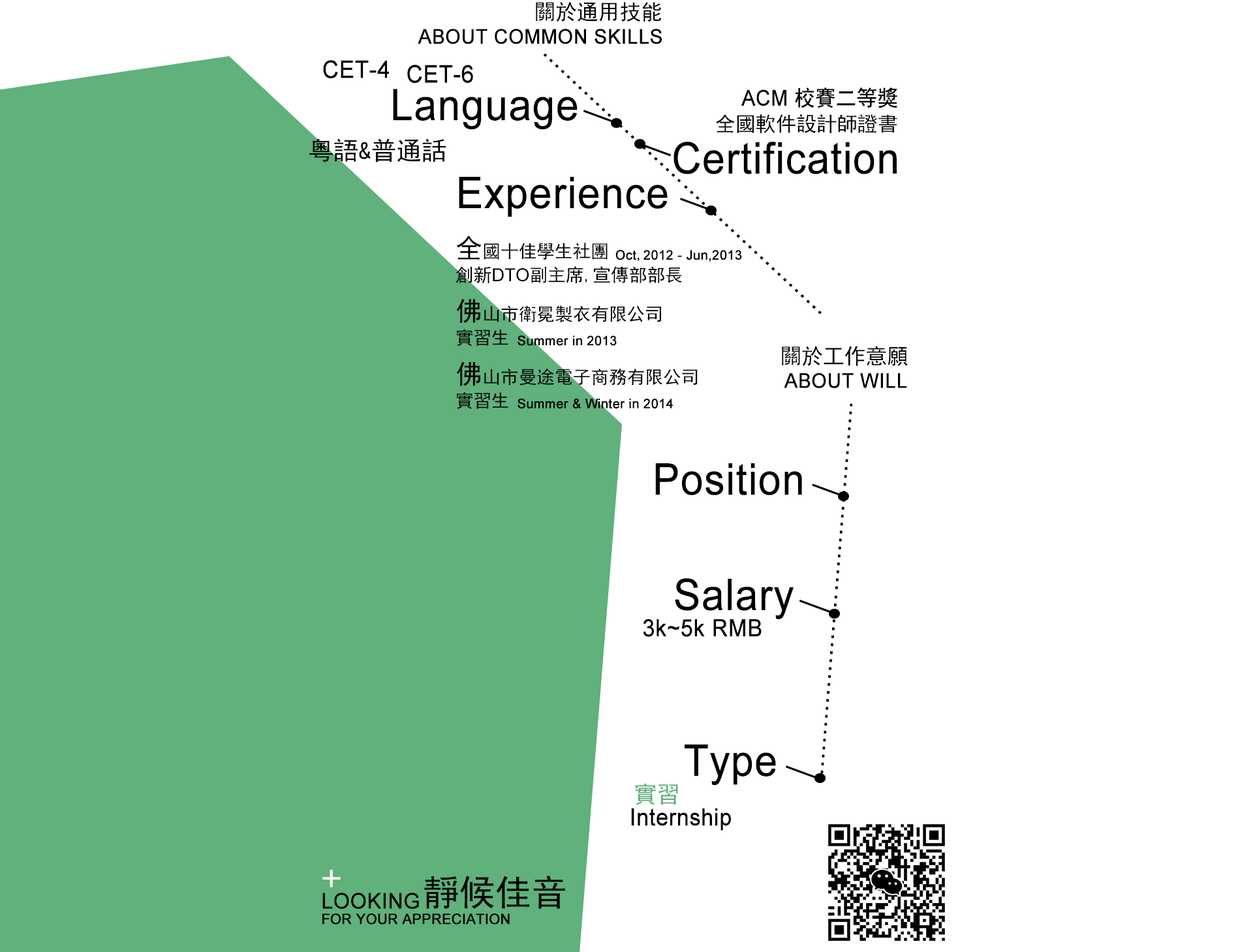
<style>
.page{position:relative;width:1253px;height:952px;background:#ffffff}
.page>*{position:absolute;margin:0}
.t1{font:21.4px "SimHei";color:#000000}
.t2{font:20.2px "ArialMT";color:#000000;font-weight:bold;scale:0.96 1}
.t3{font:24.1px "ArialMT";color:#000000;font-weight:bold;scale:0.93 1}
.t4{font:43.4px "ArialMT";color:#000000;font-weight:bold;scale:0.93 1}
.t5{font:21.7px "SimHei";color:#000000;font-weight:bold;scale:0.93 1}
.t6{font:21.7px "ArialMT";color:#000000;font-weight:bold;scale:0.93 1}
.t7{font:20.2px "SimHei";color:#000000}
.t8{font:25px "SimHei";color:#000000}
.t9{font:17.9px/25.4px "SimHei";color:#000000}
.t10{font:26.9px/31.4px "SimHei";color:#000000}
.t11{font:17.9px/31.4px "SimHei";color:#000000}
.t12{font:17.9px/25.4px "ArialMT";color:#000000}
.t13{font:13.2px "ArialMT";color:#000000;font-weight:bold}
.t14{font:13.2px "SimSun";color:#000000;font-weight:bold}
.t15{font:23.7px "ArialMT";color:#000000;font-weight:bold;scale:0.94 1}
.t16{font:22.9px "SimHei";color:#60b17c}
.t17{font:23.6px "ArialMT";color:#000000;font-weight:bold;scale:0.93 1}
.t18{font:38.8px "SimHei";color:#ffffff}
.t19{font:35.9px "SimHei";color:#000000}
.t20{font:21.5px "ArialMT";color:#000000;font-weight:bold}
.t21{font:14.2px "ArialMT";color:#000000;font-weight:bold}
</style>
<div class="page">
<p class="t1" style="left:536px;top:2px;width:126px;height:20px">關於通用技能</p>
<p class="t2" style="left:418px;top:29px;width:244px;height:15px">ABOUT COMMON SKILLS</p>
<p class="t3" style="left:323px;top:60px;width:66px;height:18px">CET-4</p>
<p class="t3" style="left:407px;top:65px;width:66px;height:19px">CET-6</p>
<p class="t4" style="left:393px;top:89px;width:184px;height:41px">Language</p>
<p class="t5" style="left:741px;top:87px;width:156px;height:21px"><span class="t6">ACM </span>校賽二等獎</p>
<p class="t7" style="left:716px;top:114px;width:181px;height:19px">全國軟件設計師證書</p>
<p class="t8" style="left:309px;top:138px;width:137px;height:24px">粵語&amp;普通話</p>
<p class="t4" style="left:673px;top:142px;width:223px;height:32px">Certification</p>
<p class="t4" style="left:459px;top:177px;width:208px;height:40px">Experience</p>
<p class="t9" style="left:455px;top:236px;width:227px;height:47px"><span class="t10">全</span><span class="t11">國十佳學生社團<br></span>創新<span class="t12">DTO</span>副主席,宣傳部部長</p>
<p class="t13" style="left:615px;top:250px;width:127px;height:12px">Oct<span class="t14">,</span>2012 - Jun,2013</p>
<p class="t11" style="left:456px;top:299px;width:206px;height:47px"><span class="t10">佛</span>山市衛冕製衣有限公司<br><span class="t9">實習生</span></p>
<p class="t13" style="left:517px;top:335px;width:100px;height:11px">Summer in 2013</p>
<p class="t1" style="left:782px;top:346px;width:126px;height:20px">關於工作意願</p>
<p class="t11" style="left:456px;top:361px;width:241px;height:48px"><span class="t10">佛</span>山市曼途電子商務有限公司<br><span class="t9">實習生</span></p>
<p class="t2" style="left:784px;top:373px;width:123px;height:15px">ABOUT WILL</p>
<p class="t13" style="left:517px;top:398px;width:156px;height:10px">Summer &amp; Winter in 2014</p>
<p class="t4" style="left:655px;top:463px;width:147px;height:32px">Position</p>
<p class="t4" style="left:675px;top:578px;width:118px;height:41px">Salary</p>
<p class="t15" style="left:643px;top:619px;width:118px;height:18px">3k~5k RMB</p>
<p class="t4" style="left:684px;top:744px;width:92px;height:42px">Type</p>
<p class="t16" style="left:635px;top:783px;width:43px;height:22px">實習</p>
<p class="t17" style="left:631px;top:808px;width:100px;height:23px">Internship</p>
<p class="t18" style="left:322px;top:870px;width:19px;height:17px">+</p>
<p class="t19" style="left:424px;top:876px;width:141px;height:33px">靜候佳音</p>
<p class="t20" style="left:322px;top:893px;width:97px;height:16px">LOOKING</p>
<p class="t21" style="left:322px;top:913px;width:188px;height:12px">FOR YOUR APPRECIATION</p>
</div>
